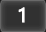
<style>
.page{position:relative;width:46px;height:32px;background:#313131}
.page>*{position:absolute;margin:0}
.t1{font:18.7px "MicrosoftYaHeiUI";color:#fffefe;font-weight:bold}
</style>
<div class="page">
<p class="t1" style="left:18px;top:7px;width:7px;height:16px">1</p>
</div>
